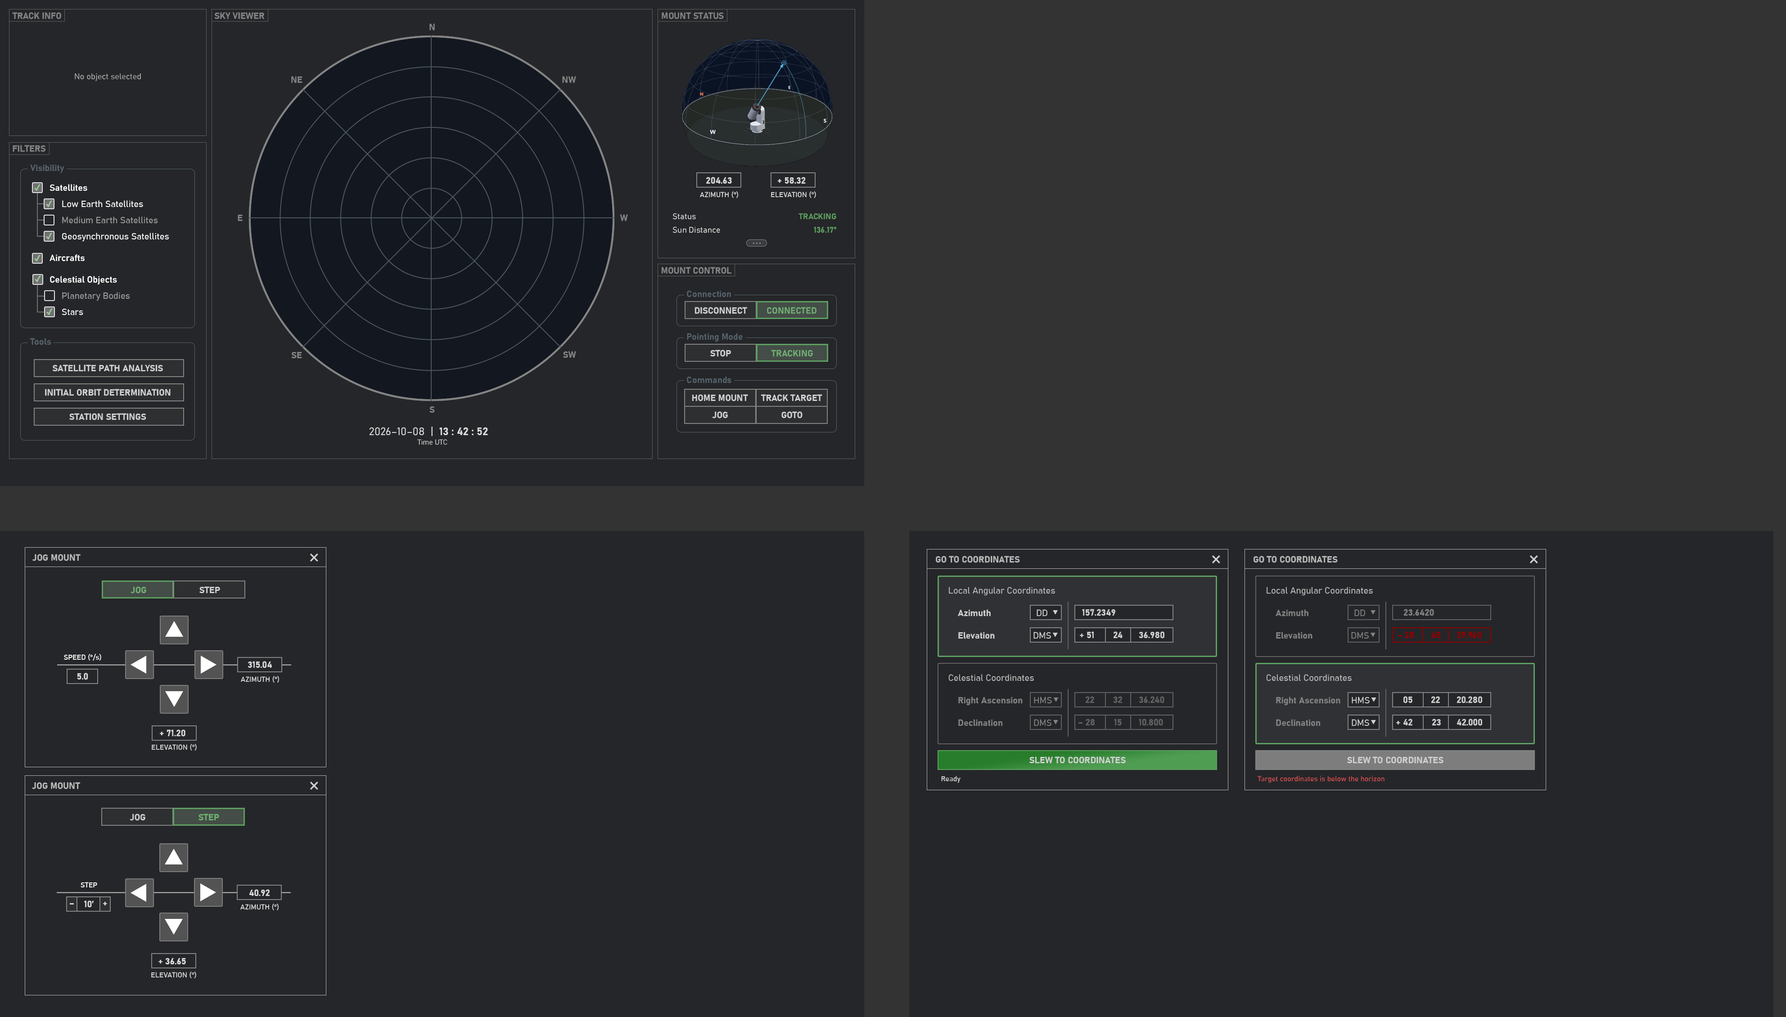
<style>
.page{position:relative;width:1786px;height:1017px;background:#252629}
.page>*{position:absolute;margin:0}
.t1{font:9px "Bahnschrift-Bold";color:#848484}
.t2{font:8.1px "Bahnschrift-SemiLight";color:#a8a8a8}
.t3{font:8.1px "SegoeUISymbol";color:#9dc997;font-weight:bold}
.t4{font:9px/21.6px "Bahnschrift-SemiBold";color:#ffffff}
.t5{font:9px/16.2px "Bahnschrift-SemiBold";color:#ffffff}
.t6{font:9px/16.2px "Bahnschrift-SemiLight";color:#ffffff}
.t7{font:9px/16.2px "Bahnschrift-SemiLight";color:#9d9d9d}
.t8{font:9px "Bahnschrift-Bold";color:#d9d9d9}
.t9{font:7.2px "Bahnschrift";color:#d9d9d9}
.t10{font:8.1px/13.5px "Bahnschrift-SemiLight";color:#d9d9d9}
.t11{font:8.1px/13.5px "Bahnschrift-Bold";color:#5d9f60}
.t12{font:13.5px "Cambria";color:#848484}
.t13{font:9px "Bahnschrift-Bold";color:#d0d0d0}
.t14{font:9px "Bahnschrift-Bold";color:#71af74}
.t15{font:10.8px "Bahnschrift-SemiLight";color:#d9d9d9}
.t16{font:10.8px "Bahnschrift-Bold";color:#d9d9d9}
.t17{font:7.2px "Bahnschrift-Light";color:#d9d9d9}
.t18{font:9px "Bahnschrift-Bold";color:#b9b9b9}
.t19{font:22.5px "Bahnschrift-Light";color:#d0d0d0}
.t20{font:9px "Bahnschrift-SemiLight";color:#b9b9b9}
.t21{font:9px/22.5px "Bahnschrift-Bold";color:#d0d0d0}
.t22{font:9px "Bahnschrift-SemiLight";color:#d0d0d0}
.t23{font:6.3px "Cambria";color:#d0d0d0}
.t24{font:9px/22.5px "Bahnschrift-Bold";color:#828282}
.t25{font:9px "Bahnschrift-SemiLight";color:#828282}
.t26{font:6.3px "Cambria";color:#828282}
.t27{font:9px "Bahnschrift-Bold";color:#828282}
.t28{font:9px "Bahnschrift-Bold";color:#828282;scale:1.5 1}
.t29{font:9px "Bahnschrift-Bold";color:#8e0000}
.t30{font:7.2px "Bahnschrift";color:#ffffff}
.t31{font:9px "Bahnschrift-Bold";color:#626262}
.t32{font:7.2px "Bahnschrift";color:#d0d0d0}
.t33{font:7.2px "Bahnschrift";color:#c94d4d}
</style>
<div class="page">
<p class="t1" style="left:12px;top:12px;width:49px;height:7px">TRACK INFO</p>
<p class="t1" style="left:214px;top:12px;width:51px;height:7px">SKY VIEWER</p>
<p class="t1" style="left:662px;top:12px;width:62px;height:7px">MOUNT STATUS</p>
<p class="t1" style="left:429px;top:23px;width:6px;height:8px">N</p>
<p class="t2" style="left:75px;top:73px;width:66px;height:8px">No object selected</p>
<p class="t1" style="left:291px;top:76px;width:11px;height:7px">NE</p>
<p class="t1" style="left:562px;top:76px;width:14px;height:7px">NW</p>
<p class="t1" style="left:13px;top:145px;width:32px;height:7px">FILTERS</p>
<p class="t3" style="left:34px;top:184px;width:6px;height:7px">✔</p>
<p class="t4" style="left:50px;top:184px;width:119px;height:131px"><span class="t5">Satellites<br></span><span class="t6">     Low Earth Satellites<br>     </span><span class="t7">Medium Earth Satellites<br></span><span class="t6">     Geosynchronous Satellites<br></span>Aircrafts <br>Celestial Objects<br>     <span class="t7">Planetary Bodies<br></span><span class="t6">     Stars</span></p>
<p class="t8" style="left:706px;top:177px;width:26px;height:7px">204.63</p>
<p class="t8" style="left:777px;top:177px;width:29px;height:7px">+ 58.32</p>
<p class="t9" style="left:700px;top:191px;width:38px;height:7px">AZIMUTH (°)</p>
<p class="t9" style="left:771px;top:191px;width:45px;height:7px">ELEVATION (°)</p>
<p class="t3" style="left:46px;top:200px;width:6px;height:7px">✔</p>
<p class="t1" style="left:238px;top:215px;width:5px;height:6px">E</p>
<p class="t1" style="left:620px;top:214px;width:8px;height:7px">W</p>
<p class="t10" style="left:672px;top:213px;width:48px;height:20px">Status<br>Sun Distance</p>
<p class="t11" style="left:798px;top:213px;width:38px;height:20px;text-align:right">TRACKING<br>136.17°</p>
<p class="t3" style="left:46px;top:233px;width:6px;height:6px">✔</p>
<p class="t12" style="left:752px;top:243px;width:8px;height:1px">…</p>
<p class="t3" style="left:34px;top:255px;width:6px;height:6px">✔</p>
<p class="t1" style="left:661px;top:267px;width:71px;height:7px">MOUNT CONTROL</p>
<p class="t3" style="left:35px;top:275px;width:6px;height:7px">✔</p>
<p class="t3" style="left:46px;top:308px;width:7px;height:7px">✔</p>
<p class="t13" style="left:694px;top:307px;width:53px;height:7px">DISCONNECT</p>
<p class="t14" style="left:767px;top:307px;width:49px;height:7px">CONNECTED</p>
<p class="t1" style="left:291px;top:352px;width:11px;height:6px">SE</p>
<p class="t1" style="left:563px;top:351px;width:13px;height:7px">SW</p>
<p class="t13" style="left:710px;top:350px;width:21px;height:7px">STOP</p>
<p class="t14" style="left:771px;top:350px;width:42px;height:7px">TRACKING</p>
<p class="t13" style="left:53px;top:364px;width:110px;height:8px">SATELLITE PATH ANALYSIS</p>
<p class="t13" style="left:45px;top:389px;width:126px;height:7px">INITIAL ORBIT DETERMINATION</p>
<p class="t13" style="left:692px;top:394px;width:56px;height:7px">HOME MOUNT</p>
<p class="t13" style="left:760px;top:394px;width:62px;height:7px">TRACK TARGET</p>
<p class="t13" style="left:69px;top:413px;width:77px;height:7px">STATION SETTINGS</p>
<p class="t1" style="left:429px;top:406px;width:6px;height:7px">S</p>
<p class="t13" style="left:712px;top:411px;width:16px;height:7px">JOG</p>
<p class="t13" style="left:781px;top:411px;width:21px;height:7px">GOTO</p>
<p class="t15" style="left:369px;top:427px;width:119px;height:9px">2026–10–08  |  <span class="t16">13 : 42 : 52</span></p>
<p class="t17" style="left:417px;top:439px;width:30px;height:6px">Time UTC</p>
<p class="t18" style="left:32px;top:554px;width:49px;height:7px">JOG MOUNT</p>
<p class="t19" style="left:310px;top:554px;width:8px;height:8px">×</p>
<p class="t18" style="left:936px;top:556px;width:84px;height:7px">GO TO COORDINATES</p>
<p class="t19" style="left:1212px;top:555px;width:8px;height:8px">×</p>
<p class="t18" style="left:1253px;top:556px;width:84px;height:7px">GO TO COORDINATES</p>
<p class="t19" style="left:1530px;top:555px;width:8px;height:8px">×</p>
<p class="t14" style="left:130px;top:586px;width:16px;height:8px">JOG</p>
<p class="t13" style="left:199px;top:586px;width:21px;height:8px">STEP</p>
<p class="t20" style="left:949px;top:587px;width:106px;height:9px">Local Angular Coordinates</p>
<p class="t20" style="left:1266px;top:587px;width:106px;height:9px">Local Angular Coordinates</p>
<p class="t21" style="left:958px;top:609px;width:36px;height:30px">Azimuth<br>Elevation</p>
<p class="t22" style="left:1036px;top:609px;width:22px;height:7px">DD  <span class="t23">▼</span></p>
<p class="t13" style="left:1082px;top:609px;width:33px;height:7px">157.2349</p>
<p class="t24" style="left:1275px;top:609px;width:37px;height:30px">Azimuth<br>Elevation</p>
<p class="t25" style="left:1354px;top:609px;width:21px;height:7px">DD  <span class="t26">▼</span></p>
<p class="t27" style="left:1403px;top:609px;width:31px;height:7px"><span class="t28"> </span>23.6420</p>
<p class="t22" style="left:1033px;top:632px;width:25px;height:7px">DMS <span class="t23">▼</span></p>
<p class="t13" style="left:1080px;top:631px;width:14px;height:8px">+ 51</p>
<p class="t13" style="left:1113px;top:631px;width:9px;height:8px">24</p>
<p class="t13" style="left:1138px;top:631px;width:26px;height:8px">36.980</p>
<p class="t25" style="left:1351px;top:632px;width:24px;height:7px">DMS <span class="t26">▼</span></p>
<p class="t29" style="left:1397px;top:631px;width:16px;height:8px">– 28</p>
<p class="t29" style="left:1431px;top:632px;width:9px;height:6px">45</p>
<p class="t29" style="left:1456px;top:631px;width:25px;height:8px">39.960</p>
<p class="t30" style="left:64px;top:654px;width:37px;height:7px">SPEED (°/s)</p>
<p class="t8" style="left:248px;top:661px;width:24px;height:7px">315.04</p>
<p class="t8" style="left:77px;top:673px;width:11px;height:7px">5.0</p>
<p class="t9" style="left:241px;top:676px;width:38px;height:7px">AZIMUTH (°)</p>
<p class="t20" style="left:948px;top:674px;width:86px;height:7px">Celestial Coordinates</p>
<p class="t20" style="left:1266px;top:674px;width:85px;height:7px">Celestial Coordinates</p>
<p class="t24" style="left:958px;top:697px;width:64px;height:29px">Right Ascension<br>Declination</p>
<p class="t25" style="left:1034px;top:697px;width:24px;height:7px">HMS <span class="t26">▼</span></p>
<p class="t31" style="left:1085px;top:696px;width:9px;height:7px">22</p>
<p class="t31" style="left:1113px;top:696px;width:9px;height:7px">32</p>
<p class="t31" style="left:1138px;top:696px;width:26px;height:7px">36.240</p>
<p class="t24" style="left:1276px;top:697px;width:64px;height:29px">Right Ascension<br>Declination</p>
<p class="t22" style="left:1351px;top:697px;width:25px;height:7px">HMS <span class="t23">▼</span></p>
<p class="t13" style="left:1403px;top:696px;width:9px;height:7px">05</p>
<p class="t13" style="left:1431px;top:696px;width:9px;height:7px">22</p>
<p class="t13" style="left:1456px;top:696px;width:26px;height:7px">20.280</p>
<p class="t25" style="left:1034px;top:719px;width:24px;height:7px">DMS <span class="t26">▼</span></p>
<p class="t31" style="left:1078px;top:719px;width:16px;height:7px">– 28</p>
<p class="t31" style="left:1114px;top:719px;width:7px;height:7px">15</p>
<p class="t31" style="left:1138px;top:719px;width:25px;height:7px">10.800</p>
<p class="t22" style="left:1351px;top:719px;width:25px;height:7px">DMS <span class="t23">▼</span></p>
<p class="t13" style="left:1396px;top:719px;width:16px;height:7px">+ 42</p>
<p class="t13" style="left:1431px;top:719px;width:9px;height:7px">23</p>
<p class="t13" style="left:1457px;top:719px;width:25px;height:7px">42.000</p>
<p class="t8" style="left:160px;top:729px;width:25px;height:8px">+ 71.20</p>
<p class="t9" style="left:152px;top:744px;width:45px;height:7px">ELEVATION (°)</p>
<p class="t13" style="left:1029px;top:756px;width:96px;height:8px">SLEW TO COORDINATES</p>
<p class="t13" style="left:1347px;top:756px;width:96px;height:8px">SLEW TO COORDINATES</p>
<p class="t18" style="left:32px;top:782px;width:48px;height:7px">JOG MOUNT</p>
<p class="t19" style="left:310px;top:782px;width:8px;height:8px">×</p>
<p class="t32" style="left:941px;top:776px;width:19px;height:7px">Ready</p>
<p class="t33" style="left:1257px;top:776px;width:127px;height:7px">Target coordinates is below the horizon</p>
<p class="t13" style="left:130px;top:814px;width:15px;height:7px">JOG</p>
<p class="t14" style="left:198px;top:814px;width:21px;height:7px">STEP</p>
<p class="t30" style="left:81px;top:882px;width:16px;height:6px">STEP</p>
<p class="t8" style="left:249px;top:889px;width:21px;height:7px">40.92</p>
<p class="t8" style="left:70px;top:903px;width:4px;height:1px">–</p>
<p class="t8" style="left:84px;top:900px;width:10px;height:8px">10’</p>
<p class="t8" style="left:103px;top:902px;width:4px;height:3px">+</p>
<p class="t9" style="left:240px;top:904px;width:39px;height:6px">AZIMUTH (°)</p>
<p class="t8" style="left:158px;top:958px;width:28px;height:7px">+ 36.65</p>
<p class="t9" style="left:151px;top:972px;width:45px;height:6px">ELEVATION (°)</p>
</div>
